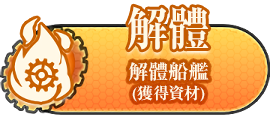
<style>
.page{position:relative;width:270px;height:117px;background:#ffffff}
.page>*{position:absolute;margin:0}
.t1{font:46.2px "RyuminPro-ExBold";color:#fffae7;scale:0.91 1}
.t2{font:16px/20px "RyuminPro-ExBold";color:#fffae7}
.t3{font:20px/20px "RyuminPro-ExBold";color:#fffae7}
</style>
<div class="page">
<p class="t1" style="left:128px;top:6px;width:81px;height:44px">解體</p>
<p class="t2" style="left:129px;top:62px;width:80px;height:40px;text-align:center"><span class="t3">解體船艦<br></span>(獲得資材)</p>
</div>
